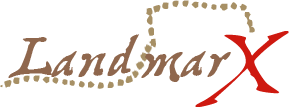
<style>
.page{position:relative;width:289px;height:107px;background:#ffffff}
.page>*{position:absolute;margin:0}
.t1{font:72px "Bellamy's-Mapbats";color:#a79065}
.t2{font:72px "TreasureMapDeadhand";color:#8f674d}
.t3{font:110.5px "TreasureMapDeadhand";color:#ce1910}
</style>
<div class="page">
<p class="t1" style="left:149px;top:0px;width:68px;height:13px;rotate:163deg">?</p>
<p class="t1" style="left:220px;top:2px;width:35px;height:31px">}</p>
<p class="t2" style="left:8px;top:34px;width:223px;height:48px">Landmar</p>
<p class="t3" style="left:195px;top:31px;width:94px;height:76px">X</p>
<p class="t1" style="left:0px;top:75px;width:68px;height:13px;rotate:163deg">?</p>
<p class="t1" style="left:69px;top:75px;width:68px;height:14px;rotate:-19deg">?</p>
</div>
